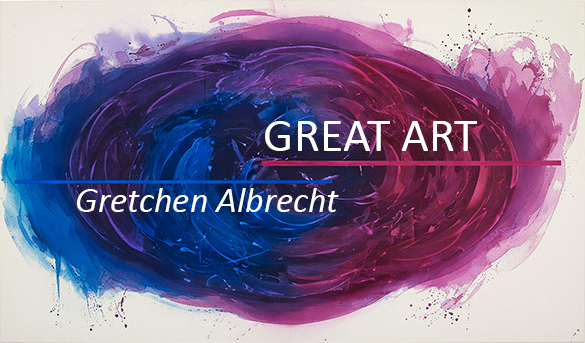
<style>
.page{position:relative;width:585px;height:343px}
.page>*{position:absolute;margin:0}
.t1{font:48px "Calibri";color:#ffffff}
.t2{font:36px "Calibri-Italic";color:#ffffff}
</style>
<div class="page">
<p class="t1" style="left:265px;top:121px;width:212px;height:30px">GREAT ART</p>
<p class="t2" style="left:77px;top:188px;width:262px;height:24px">Gretchen Albrecht</p>
</div>
